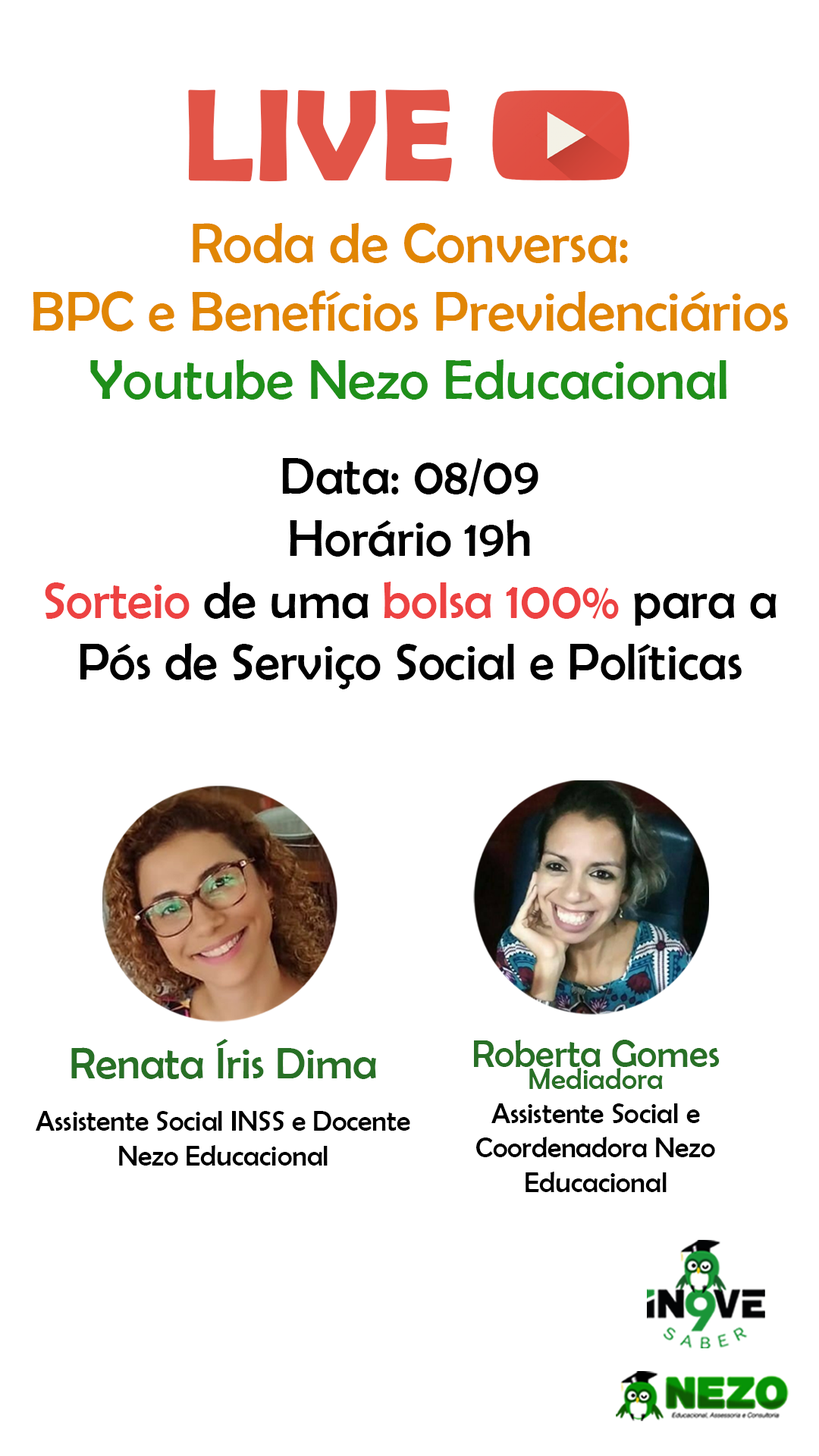
<style>
.page{position:relative;width:819px;height:1456px;background:#ffffff}
.page>*{position:absolute;margin:0}
.t1{font:131.8px "BerlinSansFBDemi-Bold";color:#e15447}
.t2{font:56.7px "BerlinSansFB-Reg";color:#e18604}
.t3{font:56.9px "BerlinSansFB-Reg";color:#1f8f1a}
.t4{font:51.6px "BerlinSansFB-Reg";color:#000000}
.t5{font:51.6px "BerlinSansFB-Reg";color:#ed4242}
.t6{font:28.6px/52.5px "BerlinSansFB-Reg";color:#000000}
.t7{font:44.5px "BerlinSansFB-Reg";color:#287026}
.t8{font:28.6px "BerlinSansFB-Reg";color:#000000}
.t9{font:38.6px/29.2px "BerlinSansFB-Reg";color:#287026}
.t10{font:29.9px/21.6px "BerlinSansFB-Reg";color:#287026}
</style>
<div class="page">
<p class="t1" style="left:188px;top:89px;width:264px;height:93px">LIVE</p>
<p class="t2" style="left:33px;top:223px;width:755px;height:177px;text-align:center">Roda de Conversa:<br>BPC e Benefícios Previdenciários <br><span class="t3">Youtube Nezo Educacional</span></p>
<p class="t4" style="left:45px;top:458px;width:732px;height:231px;text-align:center">Data: 08/09<br>Horário 19h<br><span class="t5">Sorteio</span> de uma <span class="t5">bolsa 100%</span> para a Pós de Serviço Social e Políticas Sociais</p>
<p class="t6" style="left:36px;top:1039px;width:374px;height:127px;text-align:center"><span class="t7">Renata Íris Dima<br></span>Assistente Social INSS e Docente <span class="t8">Nezo Educacional</span></p>
<p class="t8" style="left:474px;top:1040px;width:246px;height:153px;text-align:center"><span class="t9">Roberta Gomes<br></span><span class="t10">Mediadora<br></span>Assistente Social e Coordenadora Nezo Educacional</p>
</div>
